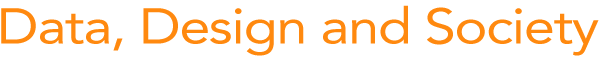
<style>
.page{position:relative;width:600px;height:80px;background:#ffffff}
.page>*{position:absolute;margin:0}
.t1{font:49.8px "Avenir-Roman";letter-spacing:-0.025em;color:#ff890f;scale:1.12 1}
</style>
<div class="page">
<p class="t1" style="left:1px;top:5px;width:598px;height:51px">Data, Design and Society</p>
</div>
